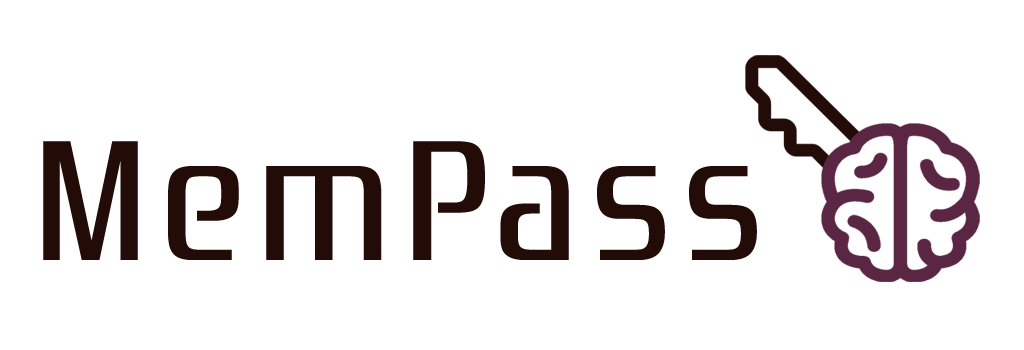
<style>
.page{position:relative;width:1024px;height:350px;background:#ffffff}
.page>*{position:absolute;margin:0}
.t1{font:169.3px "ZrnicRg-Regular";letter-spacing:0.09em;color:#230b07}
</style>
<div class="page">
<p class="t1" style="left:43px;top:141px;width:714px;height:119px">MemPass</p>
</div>
